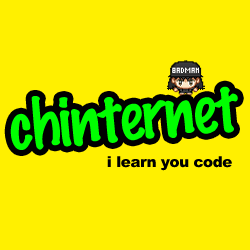
<style>
.page{position:relative;width:250px;height:250px;background:#fff000}
.page>*{position:absolute;margin:0}
.t1{font:61.6px "MarkerFelt-Thin";letter-spacing:-0.02em;color:#00ff00}
.t2{font:14.9px "Arial-Black";letter-spacing:-0.02em;color:#000000}
</style>
<div class="page">
<p class="t1" style="left:10px;top:86px;width:228px;height:64px;rotate:-5deg">chinternet</p>
<p class="t2" style="left:107px;top:156px;width:125px;height:15px">i learn you code</p>
</div>
